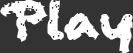
<style>
.page{position:relative;width:133px;height:53px;background:#333333}
.page>*{position:absolute;margin:0}
.t1{font:50px "squeakychalksound";color:#ffffff}
</style>
<div class="page">
<p class="t1" style="left:0px;top:0px;width:133px;height:53px">Play</p>
</div>
